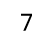
<style>
.page{position:relative;width:53px;height:41px;background:#ffffff}
.page>*{position:absolute;margin:0}
.t1{font:23.7px "DroidSans";color:#000000}
</style>
<div class="page">
<p class="t1" style="left:21px;top:13px;width:11px;height:18px">7</p>
</div>
